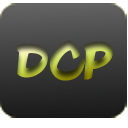
<style>
.page{position:relative;width:128px;height:128px}
.page>*{position:absolute;margin:0}
.t1{font:60px "EnamelBrush-Regular";font-weight:bold}
.t2{font:60px "EnamelBrush-Regular";letter-spacing:0.025em;font-weight:bold}
.t3{font:60px "EnamelBrush-Regular";letter-spacing:0.05em;font-weight:bold}
</style>
<div class="page">
<p class="t1" style="left:16px;top:40px;width:97px;height:41px">D<span class="t2">C</span><span class="t3">P</span></p>
</div>
